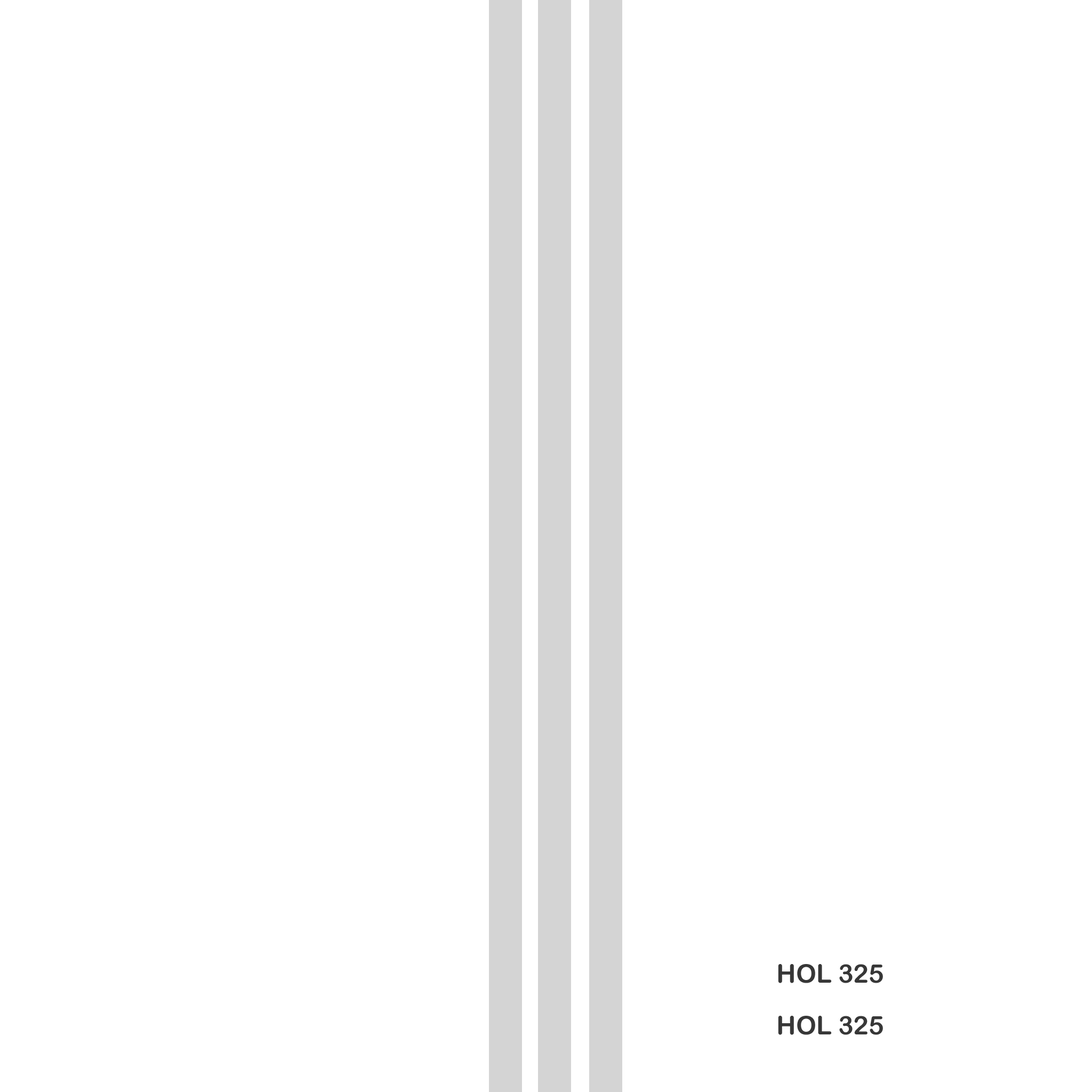
<style>
.page{position:relative;width:1092px;height:1092px;background:#ffffff}
.page>*{position:absolute;margin:0}
.t1{font:25.6px "ArialRoundedMTBold";color:#373737}
</style>
<div class="page">
<p class="t1" style="left:778px;top:964px;width:105px;height:19px">HOL 325</p>
<p class="t1" style="left:778px;top:1016px;width:105px;height:19px">HOL 325</p>
</div>
